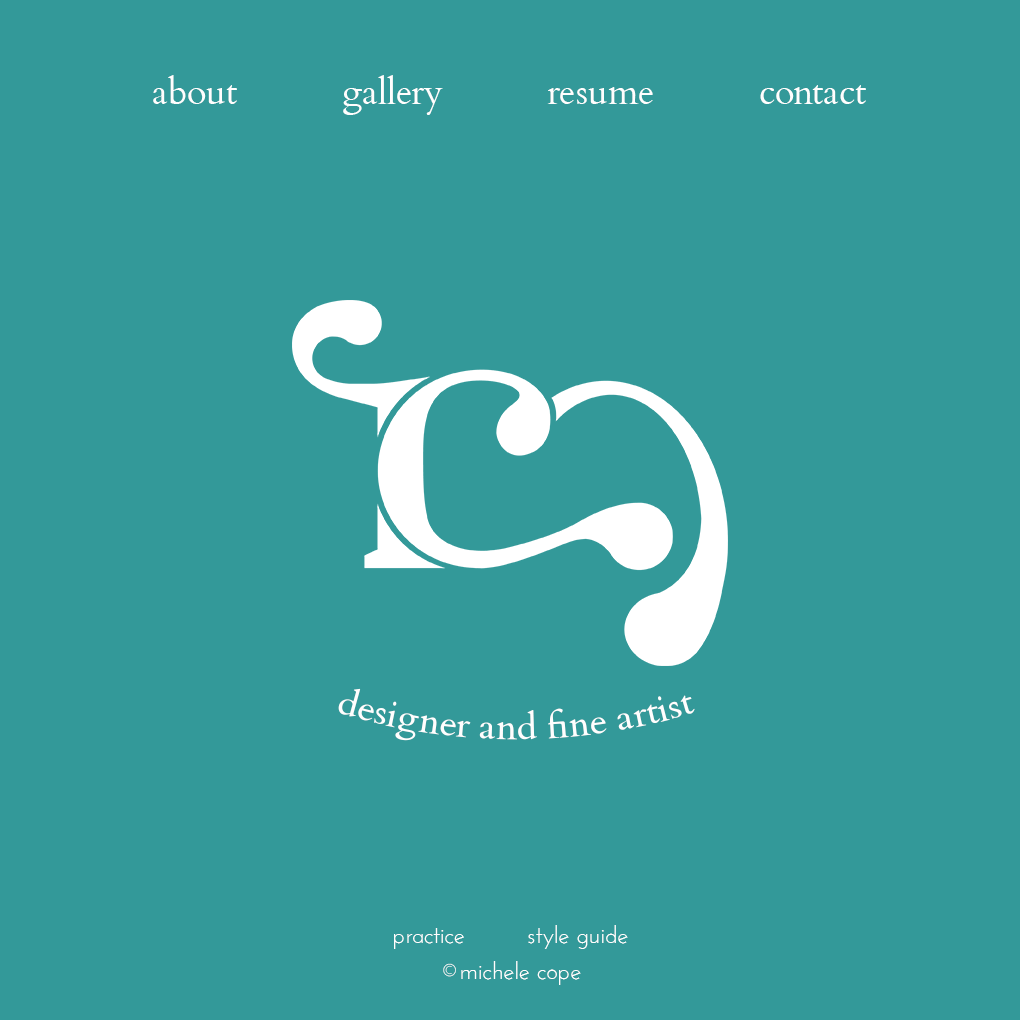
<style>
.page{position:relative;width:1020px;height:1020px;background:#339999}
.page>*{position:absolute;margin:0}
.t1{font:36px "Cardo";color:#fffefe}
.t2{font:24px/36px "JosefinSans";color:#fffefe}
</style>
<div class="page">
<p class="t1" style="left:153px;top:75px;width:713px;height:40px">about gallery resume contact</p>
<p class="t1" style="left:338px;top:688px;width:357px;height:53px">designer and fine artist</p>
<p class="t2" style="left:394px;top:925px;width:234px;height:60px;text-align:justify">practice         style guide<br>©michele cope</p>
</div>
